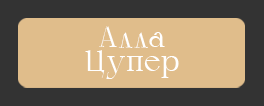
<style>
.page{position:relative;width:264px;height:106px;background:#e0bd8b}
.page>*{position:absolute;margin:0}
.t1{font:30px/24px "Calypso-Regular";color:#ffffff}
</style>
<div class="page">
<p class="t1" style="left:85px;top:26px;width:94px;height:53px;text-align:center">Алла <br>Цупер</p>
</div>
